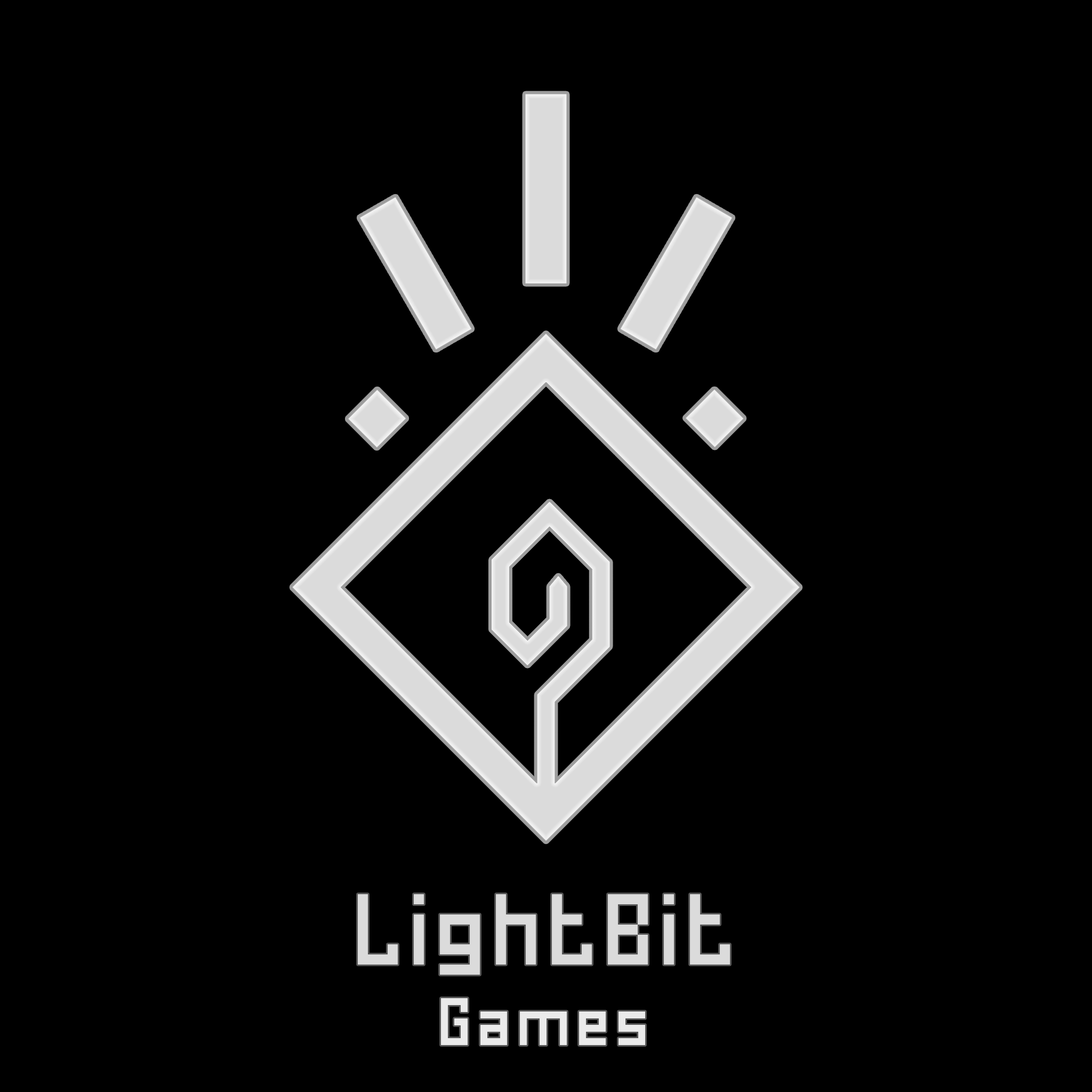
<style>
.page{position:relative;width:1092px;height:1092px;background:#000000}
.page>*{position:absolute;margin:0}
.t1{font:100px "HomespunTTBRK";letter-spacing:0.06em;color:#dbdbdb}
.t2{font:66.6px "HomespunTTBRK";letter-spacing:0.09em;color:#eaeaea}
</style>
<div class="page">
<p class="t1" style="left:358px;top:894px;width:372px;height:81px">LightBit</p>
<p class="t2" style="left:441px;top:998px;width:204px;height:47px">Games</p>
</div>
